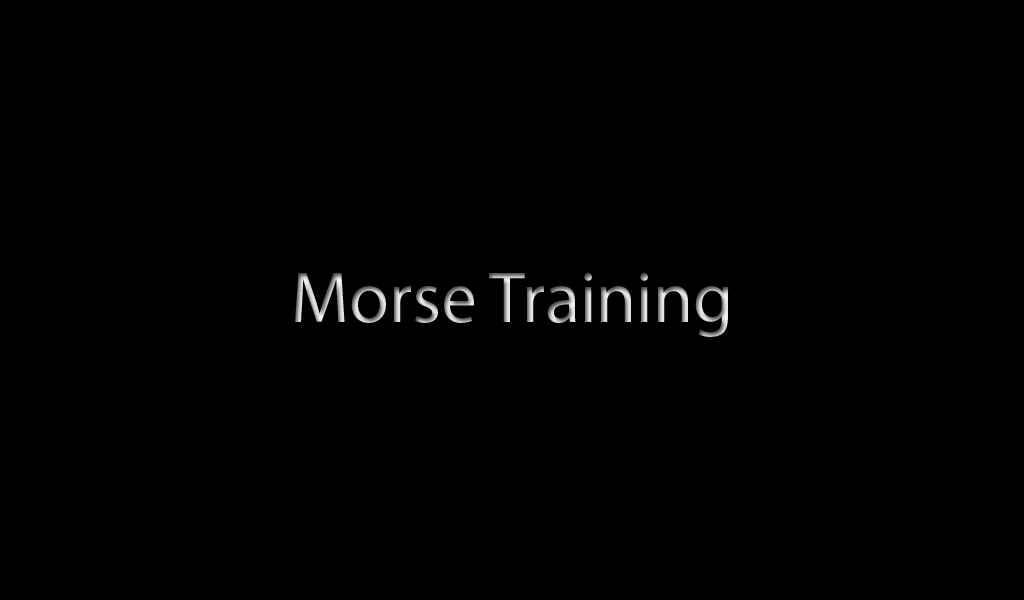
<style>
.page{position:relative;width:1024px;height:600px;background:#000000}
.page>*{position:absolute;margin:0}
.t1{font:72px "MyriadPro-Regular"}
</style>
<div class="page">
<p class="t1" style="left:295px;top:273px;width:434px;height:64px">Morse Training</p>
</div>
